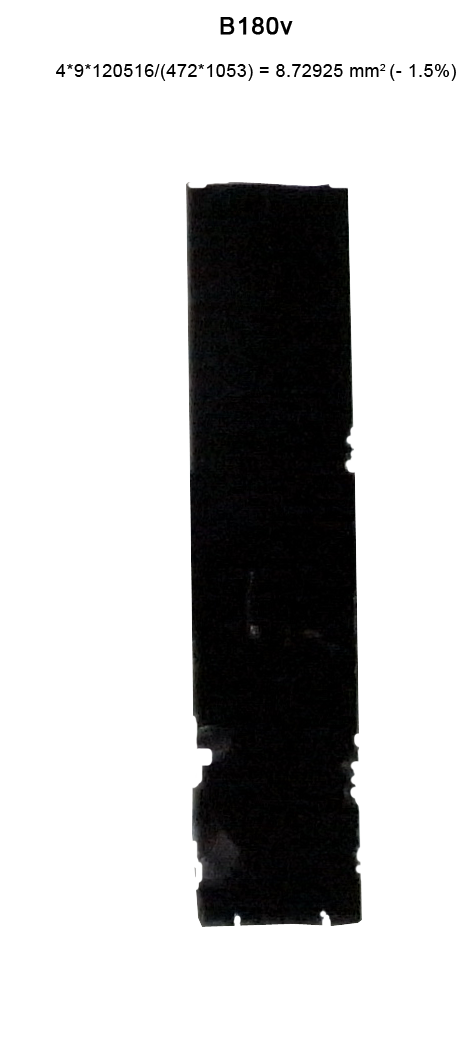
<style>
.page{position:relative;width:472px;height:1053px;background:#ffffff}
.page>*{position:absolute;margin:0}
.t1{font:24px "ArialMT";letter-spacing:0.025em;color:#000000;font-weight:bold}
.t2{font:18px "ArialMT";letter-spacing:0.025em;color:#000000}
</style>
<div class="page">
<p class="t1" style="left:220px;top:17px;width:73px;height:18px">B180v</p>
<p class="t2" style="left:56px;top:64px;width:400px;height:17px">4*9*120516/(472*1053) = 8.72925 mm2 (- 1.5%)</p>
</div>
